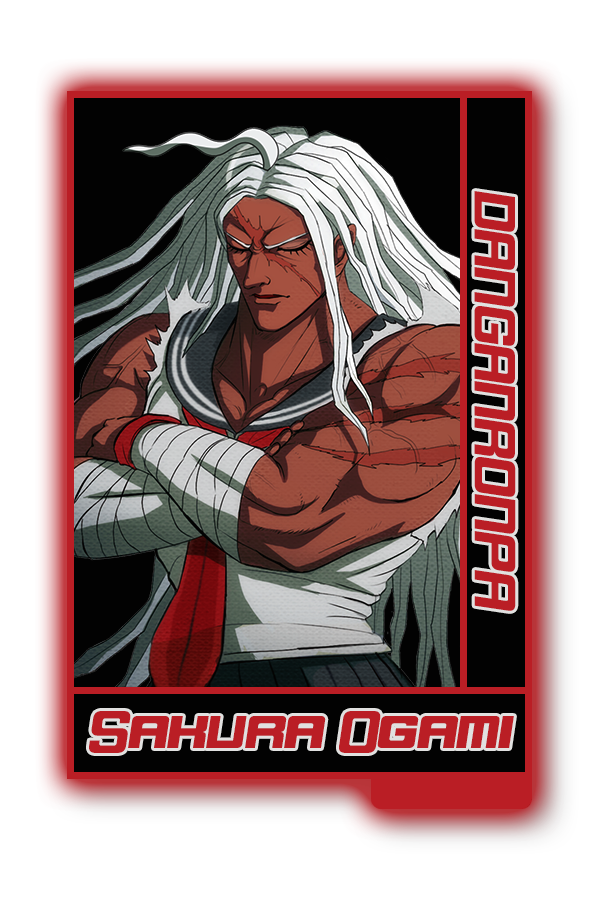
<style>
.page{position:relative;width:600px;height:900px;background:#ffffff}
.page>*{position:absolute;margin:0}
.t1{font:48.8px "DorBlue";color:#bb2c2e}
.t2{font:50.5px "DorBlue";color:#bb2c2e}
</style>
<div class="page">
<p class="t1" style="left:474px;top:191px;width:42px;height:420px;rotate:90deg">DANGANRONPA</p>
<p class="t2" style="left:89px;top:711px;width:425px;height:42px">Sakura Ogami</p>
</div>
